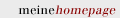
<style>
.page{position:relative;width:120px;height:18px;background:#ebebeb}
.page>*{position:absolute;margin:0}
.t1{font:12px "WalbaumBook-Regular";letter-spacing:0.025em;color:#880000;font-style:italic}
.t2{font:12px "WalbaumBook-Regular";letter-spacing:0.025em;color:#000000}
</style>
<div class="page">
<p class="t1" style="left:18px;top:5px;width:98px;height:12px"><span class="t2">meine</span>homepage</p>
</div>
